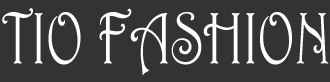
<style>
.page{position:relative;width:330px;height:82px;background:#333333}
.page>*{position:absolute;margin:0}
.t1{font:73.9px "Harrington";color:#ffffff;scale:0.75 1}
</style>
<div class="page">
<p class="t1" style="left:2px;top:8px;width:327px;height:67px">TIO FASHION</p>
</div>
